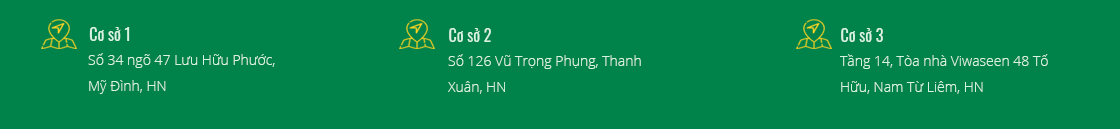
<style>
.page{position:relative;width:1120px;height:129px;background:#00834a}
.page>*{position:absolute;margin:0}
.t1{font:16px "Oswald-Regular";color:#d8f3e4}
.t2{font:14px/26px "OpenSans-Light";color:#d8f3e4}
</style>
<div class="page">
<p class="t1" style="left:89px;top:27px;width:41px;height:14px">Cơ sở 1</p>
<p class="t1" style="left:449px;top:28px;width:42px;height:14px">Cơ sở 2</p>
<p class="t1" style="left:841px;top:28px;width:42px;height:14px">Cơ sở 3</p>
<p class="t2" style="left:88px;top:53px;width:187px;height:41px">Số 34 ngõ 47 Lưu Hữu Phước, <br>Mỹ Đình, HN</p>
<p class="t2" style="left:448px;top:54px;width:193px;height:40px">Số 126 Vũ Trọng Phụng, Thanh <br>Xuân, HN</p>
<p class="t2" style="left:840px;top:54px;width:208px;height:40px">Tầng 14, Tòa nhà Viwaseen 48 Tố <br>Hữu, Nam Từ Liêm, HN</p>
</div>
